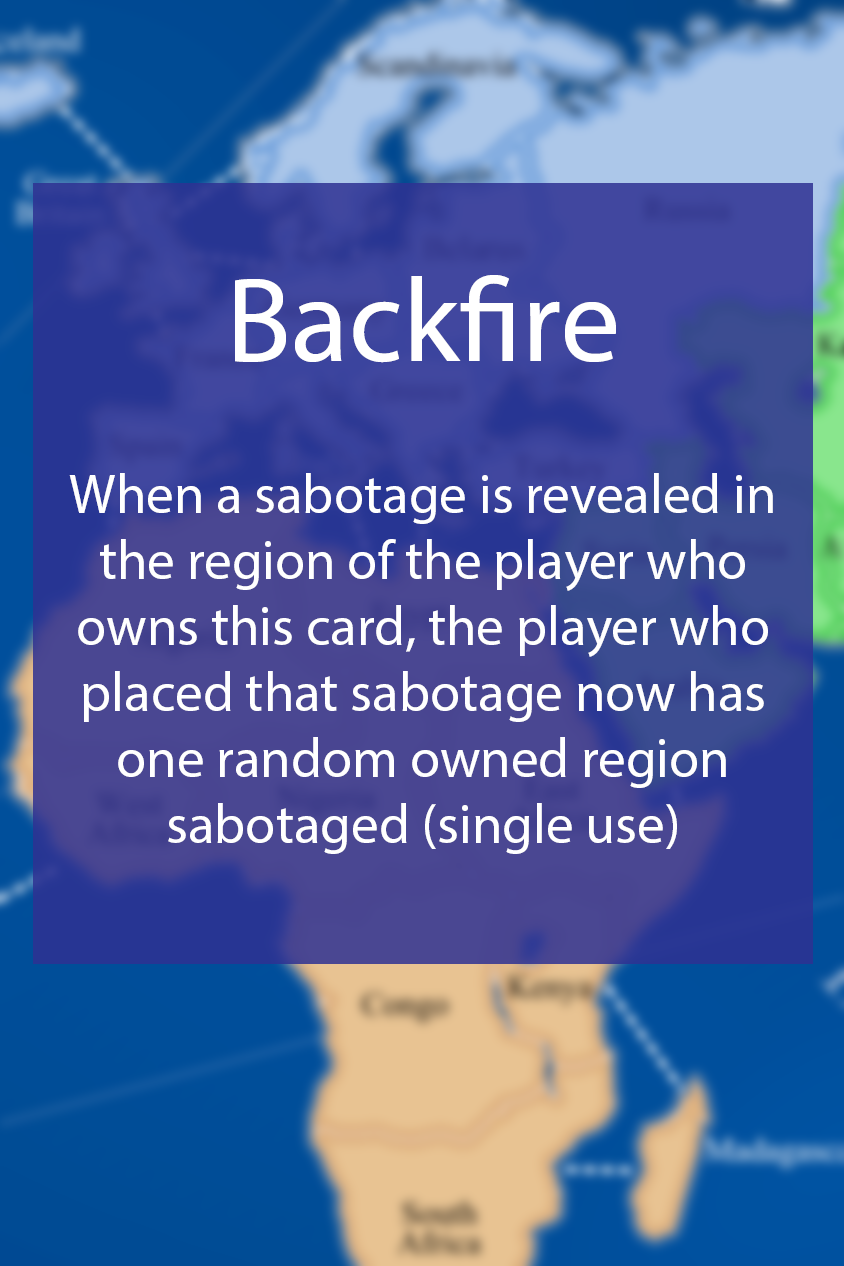
<style>
.page{position:relative;width:844px;height:1266px}
.page>*{position:absolute;margin:0}
.t1{font:55px "MyriadPro-Regular";color:#ffffff}
.t2{font:48px "MyriadPro-Regular";color:#ffffff}
.t3{font:120px "MyriadPro-Regular";color:#ffffff}
</style>
<div class="page">
<p class="t1" style="left:69px;top:275px;width:704px;height:579px;text-align:center"><span class="t2"><br></span><span class="t3">Backfire<br><br><br><br></span>When a sabotage is revealed in the region of the player who owns this card, the player who placed that sabotage now has one random owned region sabotaged (single use)</p>
</div>
